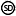
<style>
.page{position:relative;width:16px;height:16px;background:#ffffff}
.page>*{position:absolute;margin:0}
.t1{font:7.5px "MyriadPro-Regular";color:#000000}
</style>
<div class="page">
<p class="t1" style="left:4px;top:5px;width:9px;height:6px">SD</p>
</div>
